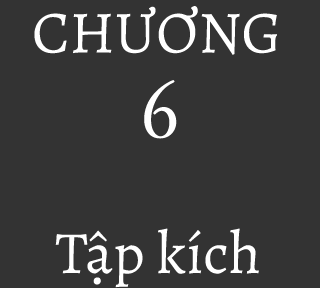
<style>
.page{position:relative;width:320px;height:288px;background:#333333}
.page>*{position:absolute;margin:0}
.t1{font:60px "Alegreya-Regular";color:#ffffff}
</style>
<div class="page">
<p class="t1" style="left:34px;top:6px;width:243px;height:49px">CHƯƠNG</p>
<p class="t1" style="left:55px;top:228px;width:204px;height:60px">Tập kích</p>
</div>
